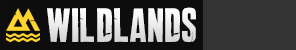
<style>
.page{position:relative;width:296px;height:50px;background:#0d0d0d}
.page>*{position:absolute;margin:0}
.t1{font:47.9px "BigBrother";letter-spacing:0.007em;color:#eaeaea}
</style>
<div class="page">
<p class="t1" style="left:47px;top:7px;width:149px;height:35px">WILDLANDS</p>
</div>
